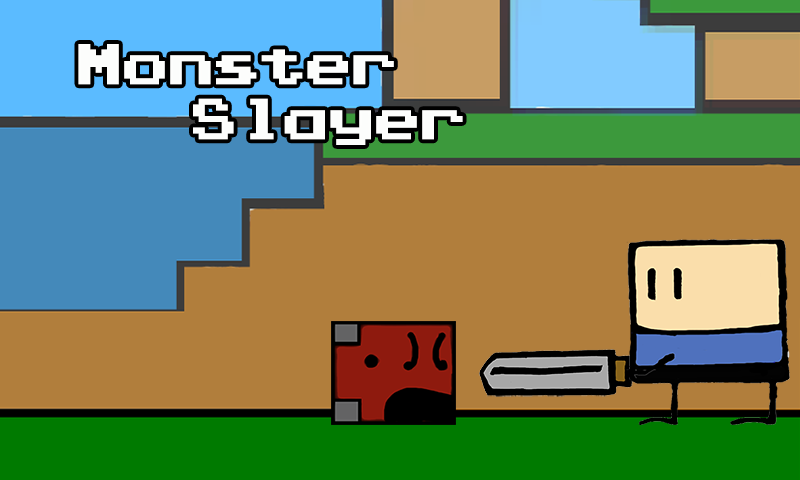
<style>
.page{position:relative;width:800px;height:480px;background:#b17e3c}
.page>*{position:absolute;margin:0}
.t1{font:45.8px "PressStartK";color:#fcfdfc}
</style>
<div class="page">
<p class="t1" style="left:78px;top:44px;width:385px;height:101px;text-align:center">Monster<br>    Slayer</p>
</div>
